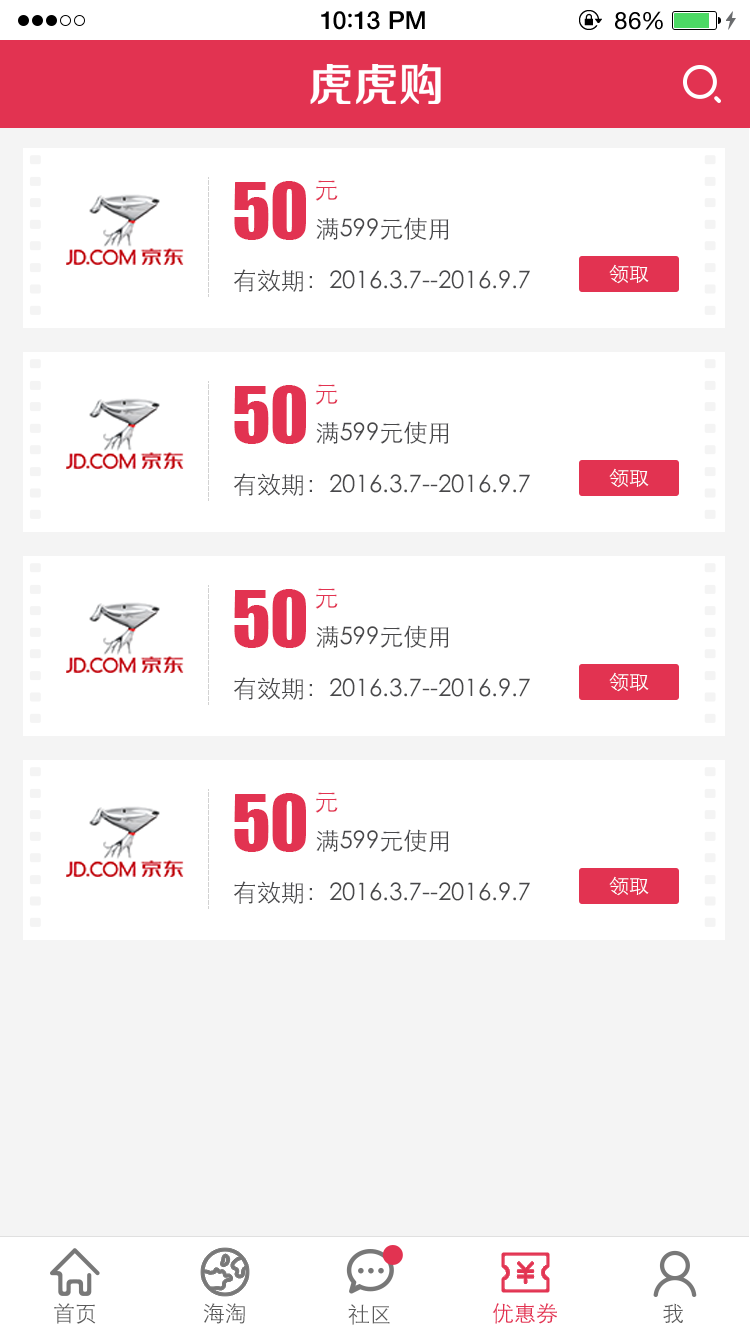
<style>
.page{position:relative;width:750px;height:1334px;background:#ffffff}
.page>*{position:absolute;margin:0}
.t1{font:25px "HelveticaNeue-Medium";letter-spacing:0.015em;color:#000000}
.t2{font:25px "ArialRoundedMTBold";letter-spacing:0.015em;color:#000000}
.t3{font:24px "HelveticaNeue";letter-spacing:0.03em;color:#000000}
.t4{font:72px "Impact";color:#e23351}
.t5{font:24px "STXihei";color:#e23351}
.t6{font:24px "STXihei";color:#48484a}
.t7{font:20px "STXihei";color:#ffffff}
.t8{font:21.9px "STXihei";color:#5a5a5a}
.t9{font:21.9px "STXihei";color:#e23351}
</style>
<div class="page">
<p class="t1" style="left:321px;top:11px;width:104px;height:19px">10<span class="t2">:</span>13 PM</p>
<p class="t3" style="left:615px;top:11px;width:48px;height:19px">86%</p>
<p class="t4" style="left:234px;top:181px;width:72px;height:59px">50</p>
<p class="t5" style="left:315px;top:180px;width:23px;height:21px">元</p>
<p class="t6" style="left:316px;top:217px;width:133px;height:23px">满599元使用</p>
<p class="t6" style="left:234px;top:269px;width:296px;height:23px">有效期：2016.3.7--2016.9.7</p>
<p class="t7" style="left:609px;top:264px;width:40px;height:20px">领取</p>
<p class="t4" style="left:234px;top:385px;width:72px;height:59px">50</p>
<p class="t5" style="left:315px;top:384px;width:23px;height:21px">元</p>
<p class="t6" style="left:316px;top:421px;width:133px;height:23px">满599元使用</p>
<p class="t6" style="left:234px;top:473px;width:296px;height:23px">有效期：2016.3.7--2016.9.7</p>
<p class="t7" style="left:609px;top:468px;width:40px;height:20px">领取</p>
<p class="t4" style="left:234px;top:589px;width:72px;height:59px">50</p>
<p class="t5" style="left:315px;top:588px;width:23px;height:21px">元</p>
<p class="t6" style="left:316px;top:625px;width:133px;height:23px">满599元使用</p>
<p class="t6" style="left:234px;top:677px;width:296px;height:23px">有效期：2016.3.7--2016.9.7</p>
<p class="t7" style="left:609px;top:672px;width:40px;height:20px">领取</p>
<p class="t4" style="left:234px;top:793px;width:72px;height:59px">50</p>
<p class="t5" style="left:315px;top:792px;width:23px;height:21px">元</p>
<p class="t6" style="left:316px;top:829px;width:133px;height:23px">满599元使用</p>
<p class="t6" style="left:234px;top:881px;width:296px;height:23px">有效期：2016.3.7--2016.9.7</p>
<p class="t7" style="left:609px;top:876px;width:40px;height:20px">领取</p>
<p class="t8" style="left:54px;top:1303px;width:42px;height:21px">首页</p>
<p class="t8" style="left:203px;top:1303px;width:42px;height:21px">海淘</p>
<p class="t8" style="left:348px;top:1304px;width:42px;height:21px">社区</p>
<p class="t9" style="left:492px;top:1303px;width:65px;height:21px">优惠券</p>
<p class="t8" style="left:663px;top:1303px;width:20px;height:20px">我</p>
</div>
